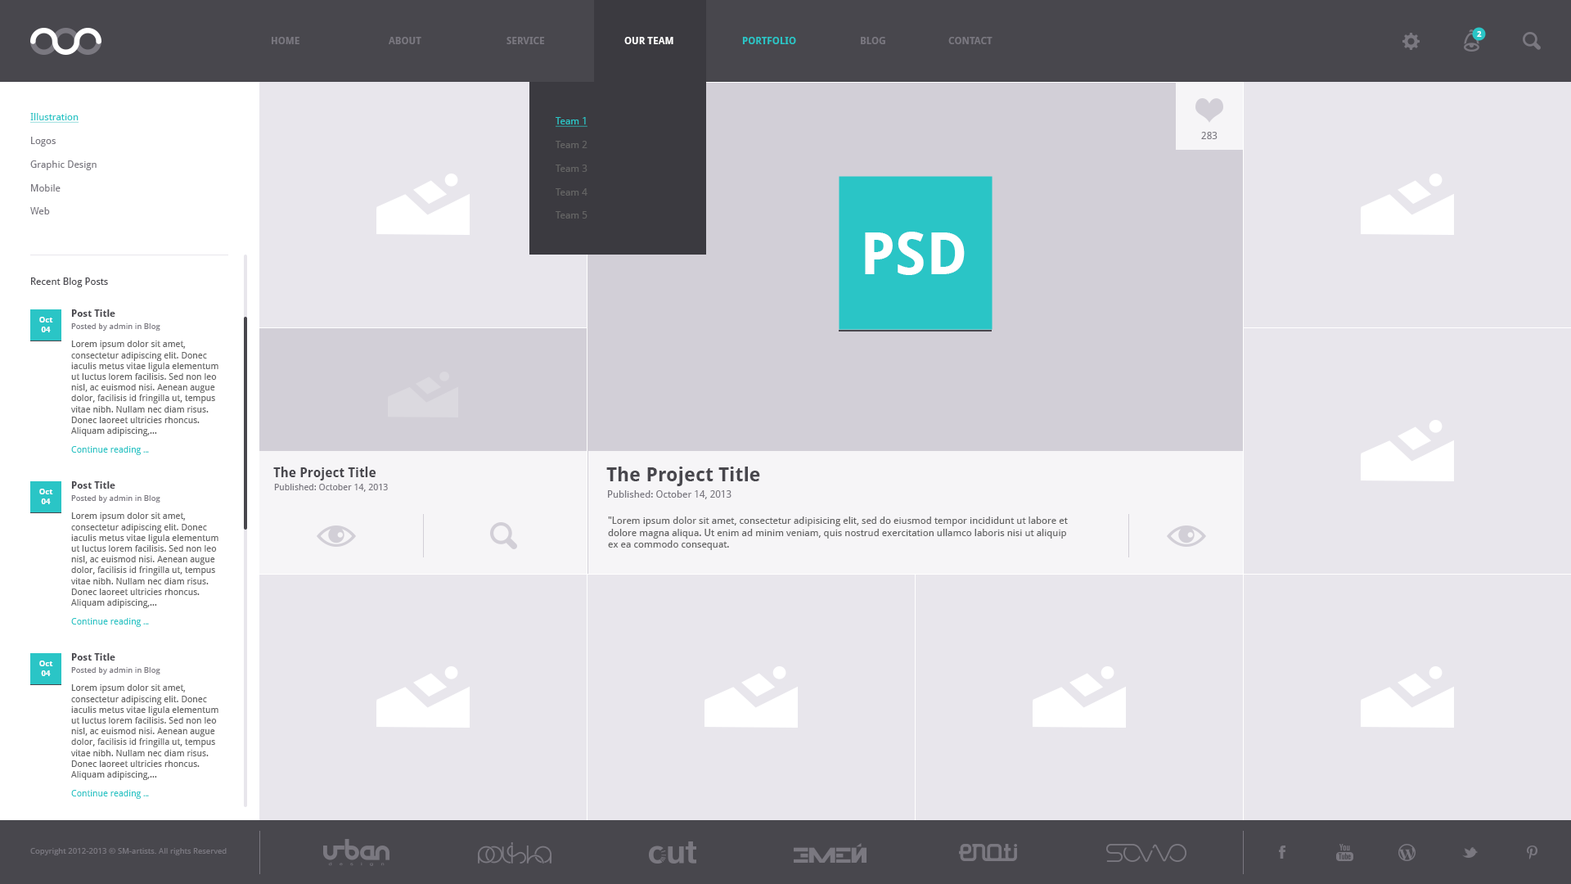
<style>
.page{position:relative;width:1571px;height:884px;background:#e8e6ec}
.page>*{position:absolute;margin:0}
.t1{font:9.8px "DroidSans-Bold";color:#7a7880;text-transform:uppercase}
.t2{font:9.8px "DroidSans-Bold";color:#ffffff;text-transform:uppercase}
.t3{font:9.8px "DroidSans-Bold";color:#2ac5c6;text-transform:uppercase}
.t4{font:8.2px "DroidSans-Bold";color:#ffffff}
.t5{font:9.8px "DroidSans";color:#7a7880}
.t6{font:9.8px "DroidSans";color:#2ac5c6;text-decoration:underline}
.t7{font:9.8px "DroidSans";color:#646464}
.t8{font:58.9px "DroidSans-Bold";color:#ffffff}
.t9{font:9.8px "DroidSans";color:#48474d}
.t10{font:9.8px "DroidSans-Bold";color:#48474d}
.t11{font:8.2px "DroidSans";color:#7a7880}
.t12{font:9px "DroidSans";color:#646464}
.t13{font:9px "DroidSans";color:#2ac5c6}
.t14{font:9px "MyriadPro-Regular";color:#2ac5c6}
.t15{font:13.1px "DroidSans-Bold";color:#48474d}
.t16{font:19.6px "DroidSans-Bold";color:#48474d}
.t17{font:9px "DroidSans";color:#7a7880}
</style>
<div class="page">
<p class="t1" style="left:272px;top:37px;width:720px;height:7px">Home    About   Service   <span class="t2">Our Team   </span><span class="t3">Portfolio </span>  Blog   Contact</p>
<p class="t4" style="left:1477px;top:31px;width:5px;height:6px">2</p>
<p class="t5" style="left:30px;top:113px;width:67px;height:101px"><span class="t6">Illustration<br><br></span>Logos<br><br>Graphic Design<br><br>Mobile<br><br>Web</p>
<p class="t7" style="left:556px;top:117px;width:31px;height:101px"><span class="t6">Team 1<br></span><br>Team 2<br><br>Team 3<br><br>Team 4<br><br>Team 5</p>
<p class="t5" style="left:1201px;top:132px;width:16px;height:7px">283</p>
<p class="t8" style="left:865px;top:232px;width:100px;height:43px">PSD</p>
<p class="t9" style="left:31px;top:277px;width:77px;height:10px">Recent Blog Posts</p>
<p class="t4" style="left:39px;top:317px;width:14px;height:15px;text-align:center">Oct<br>04</p>
<p class="t10" style="left:71px;top:309px;width:44px;height:8px">Post Title</p>
<p class="t11" style="left:71px;top:323px;width:89px;height:8px">Posted by admin in Blog</p>
<p class="t12" style="left:71px;top:340px;width:147px;height:96px">Lorem ipsum dolor sit amet, consectetur adipiscing elit. Donec iaculis metus vitae ligula elementum ut luctus lorem facilisis. Sed non leo nisl, ac euismod nisi. Aenean augue dolor, facilisis id fringilla ut, tempus vitae nibh. Nullam nec diam risus. Donec laoreet ultricies rhoncus. Aliquam adipiscing,…</p>
<p class="t13" style="left:71px;top:446px;width:78px;height:9px">Continue reading <span class="t14">...</span></p>
<p class="t15" style="left:273px;top:466px;width:103px;height:14px">The Project Title</p>
<p class="t16" style="left:606px;top:466px;width:154px;height:20px">The Project Title</p>
<p class="t10" style="left:71px;top:481px;width:44px;height:7px">Post Title</p>
<p class="t17" style="left:274px;top:484px;width:114px;height:8px">Published: October 14, 2013</p>
<p class="t4" style="left:39px;top:488px;width:14px;height:16px;text-align:center">Oct<br>04</p>
<p class="t11" style="left:71px;top:495px;width:89px;height:7px">Posted by admin in Blog</p>
<p class="t5" style="left:608px;top:490px;width:123px;height:9px">Published: October 14, 2013</p>
<p class="t12" style="left:71px;top:512px;width:147px;height:96px">Lorem ipsum dolor sit amet, consectetur adipiscing elit. Donec iaculis metus vitae ligula elementum ut luctus lorem facilisis. Sed non leo nisl, ac euismod nisi. Aenean augue dolor, facilisis id fringilla ut, tempus vitae nibh. Nullam nec diam risus. Donec laoreet ultricies rhoncus. Aliquam adipiscing,…</p>
<p class="t7" style="left:608px;top:516px;width:460px;height:34px">"Lorem ipsum dolor sit amet, consectetur adipisicing elit, sed do eiusmod tempor incididunt ut labore et<br>dolore magna aliqua. Ut enim ad minim veniam, quis nostrud exercitation ullamco laboris nisi ut aliquip<br>ex ea commodo consequat.</p>
<p class="t13" style="left:71px;top:618px;width:78px;height:9px">Continue reading <span class="t14">...</span></p>
<p class="t10" style="left:71px;top:653px;width:44px;height:7px">Post Title</p>
<p class="t4" style="left:39px;top:660px;width:14px;height:16px;text-align:center">Oct<br>04</p>
<p class="t11" style="left:71px;top:667px;width:89px;height:7px">Posted by admin in Blog</p>
<p class="t12" style="left:71px;top:684px;width:147px;height:96px">Lorem ipsum dolor sit amet, consectetur adipiscing elit. Donec iaculis metus vitae ligula elementum ut luctus lorem facilisis. Sed non leo nisl, ac euismod nisi. Aenean augue dolor, facilisis id fringilla ut, tempus vitae nibh. Nullam nec diam risus. Donec laoreet ultricies rhoncus. Aliquam adipiscing,…</p>
<p class="t13" style="left:71px;top:790px;width:78px;height:9px">Continue reading <span class="t14">...</span></p>
<p class="t11" style="left:30px;top:848px;width:197px;height:7px">Copyright 2012-2013 © SM-artists. All rights Reserved</p>
</div>
